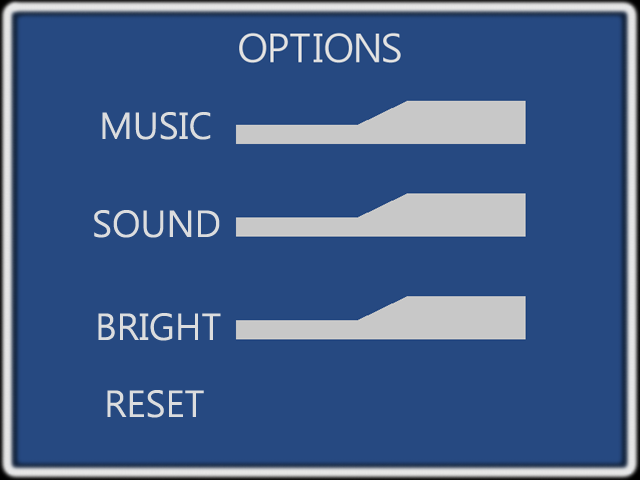
<style>
.page{position:relative;width:640px;height:480px;background:#264981}
.page>*{position:absolute;margin:0}
.t1{font:35px "MicrosoftJhengHeiRegular";color:#dcddde}
</style>
<div class="page">
<p class="t1" style="left:102px;top:112px;width:109px;height:28px">MUSIC</p>
<p class="t1" style="left:94px;top:210px;width:126px;height:28px">SOUND</p>
<p class="t1" style="left:98px;top:313px;width:123px;height:28px">BRIGHT</p>
<p class="t1" style="left:107px;top:390px;width:97px;height:28px">RESET</p>
</div>
